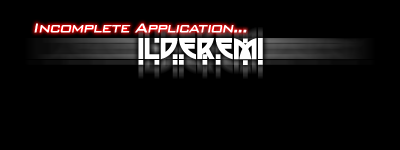
<style>
.page{position:relative;width:400px;height:150px;background:#000000}
.page>*{position:absolute;margin:0}
.t1{font:17.7px "BankGothicBT-Medium";letter-spacing:-0.075em;color:#ffffff;font-style:italic}
.t2{font:28.4px "BalaCynwyd";letter-spacing:-0.015em;color:#ffffff;font-weight:bold}
</style>
<div class="page">
<p class="t1" style="left:34px;top:23px;width:213px;height:10px">Incomplete Application...</p>
<p class="t2" style="left:138px;top:38px;width:125px;height:27px">ILDEREMI</p>
</div>
